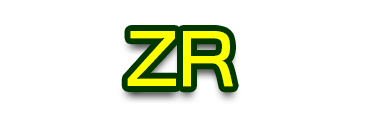
<style>
.page{position:relative;width:368px;height:118px;background:#ffffff}
.page>*{position:absolute;margin:0}
.t1{font:69.3px "NewRodinPro-DB";letter-spacing:-0.022em;color:#feff00}
</style>
<div class="page">
<p class="t1" style="left:127px;top:31px;width:106px;height:56px">ZR</p>
</div>
